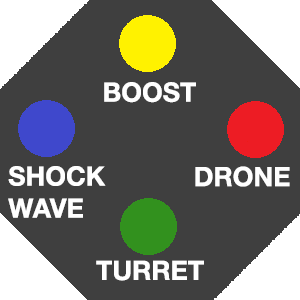
<style>
.page{position:relative;width:300px;height:300px;background:#3f3f3f}
.page>*{position:absolute;margin:0}
.t1{font:26.7px "HelveticaNeue-Bold";color:#ffffff}
</style>
<div class="page">
<p class="t1" style="left:104px;top:82px;width:92px;height:21px">BOOST</p>
<p class="t1" style="left:8px;top:166px;width:98px;height:52px">SHOCK<br>WAVE</p>
<p class="t1" style="left:195px;top:166px;width:95px;height:21px">DRONE</p>
<p class="t1" style="left:96px;top:260px;width:108px;height:21px">TURRET</p>
</div>
